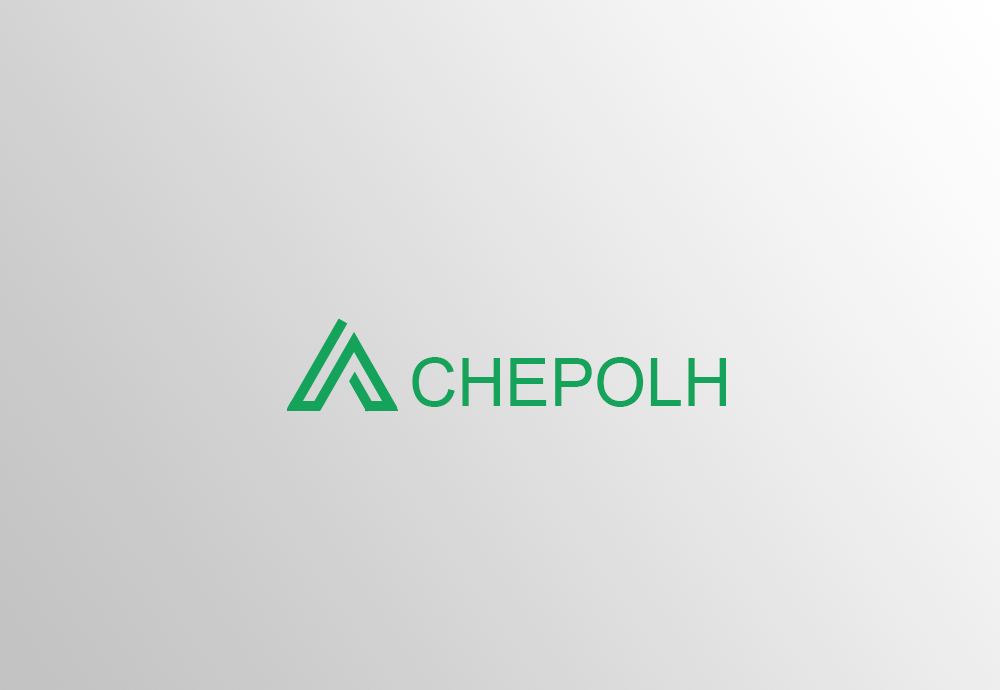
<style>
.page{position:relative;width:1000px;height:690px}
.page>*{position:absolute;margin:0}
.t1{font:66.7px "ArialMT";color:#15a35b}
</style>
<div class="page">
<p class="t1" style="left:412px;top:357px;width:314px;height:50px">CHEPOLH</p>
</div>
